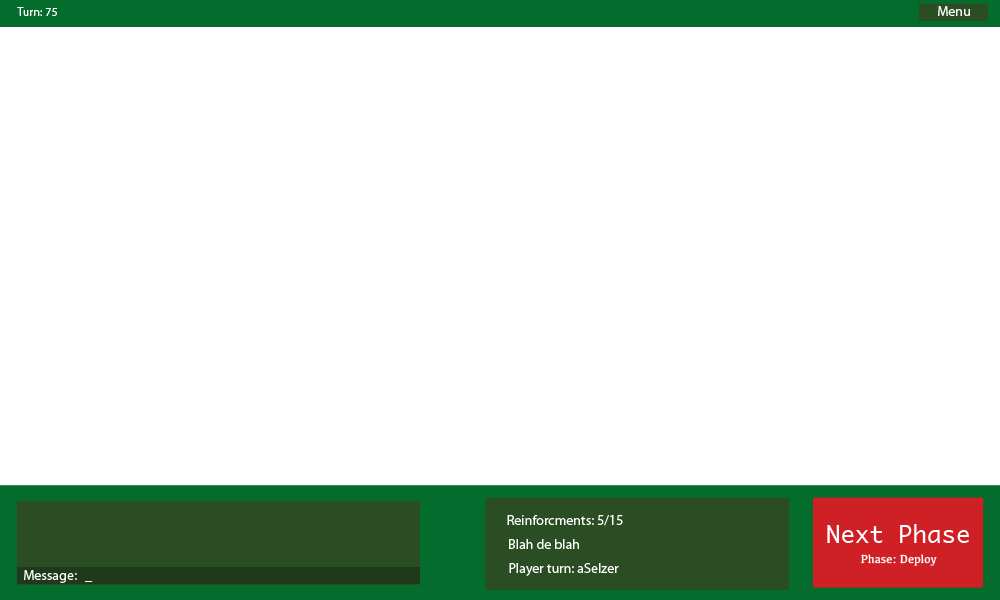
<style>
.page{position:relative;width:1000px;height:600px;background:#ffffff}
.page>*{position:absolute;margin:0}
.t1{font:14px "MyriadPro-Regular";color:#ffffff}
.t2{font:12px "MyriadPro-Regular";color:#ffffff}
.t3{font:24px "Monaco";color:#ffffff}
.t4{font:12px "Kefa-Regular";color:#ffffff}
</style>
<div class="page">
<p class="t1" style="left:938px;top:6px;width:32px;height:10px">Menu</p>
<p class="t2" style="left:17px;top:7px;width:40px;height:9px">Turn: 75</p>
<p class="t1" style="left:507px;top:515px;width:116px;height:11px">Reinforcments: 5/15</p>
<p class="t3" style="left:827px;top:524px;width:142px;height:19px">Next Phase</p>
<p class="t1" style="left:509px;top:539px;width:70px;height:10px">Blah de blah</p>
<p class="t4" style="left:860px;top:554px;width:77px;height:12px">Phase: Deploy</p>
<p class="t1" style="left:509px;top:563px;width:110px;height:13px">Player turn: aSelzer</p>
<p class="t1" style="left:24px;top:570px;width:53px;height:13px">Message:</p>
<p class="t1" style="left:85px;top:581px;width:8px;height:1px">_</p>
</div>
